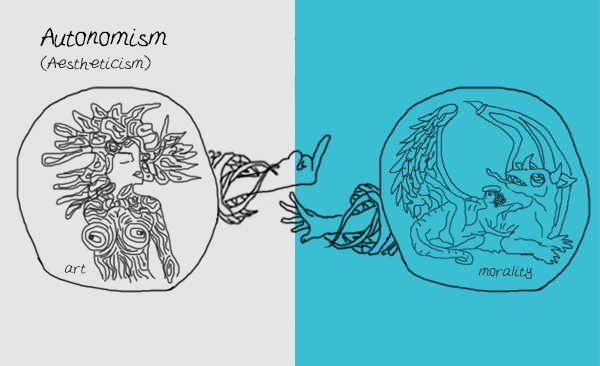
<style>
.page{position:relative;width:600px;height:366px;background:#39bed2}
.page>*{position:absolute;margin:0}
.t1{font:34.5px "MyScriptFont";color:#000000}
.t2{font:22.3px "MyScriptFont";color:#2e2e2e}
.t3{font:19.7px "MyScriptFont";color:#353535}
</style>
<div class="page">
<p class="t1" style="left:40px;top:27px;width:128px;height:21px">Autonomism</p>
<p class="t2" style="left:40px;top:55px;width:111px;height:17px">(Aestheticism)</p>
<p class="t3" style="left:64px;top:264px;width:22px;height:10px">art</p>
<p class="t3" style="left:478px;top:265px;width:54px;height:14px">morality</p>
</div>
